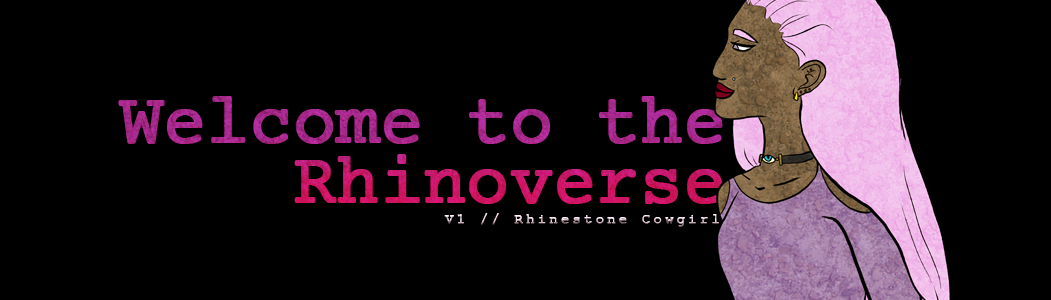
<style>
.page{position:relative;width:1051px;height:300px;background:#000000}
.page>*{position:absolute;margin:0}
.t1{font:72px/60px "CourierPrime";letter-spacing:-0.025em;font-weight:bold}
.t2{font:14px "CourierNewPSMT";letter-spacing:0.2em;font-weight:bold}
</style>
<div class="page">
<p class="t1" style="left:118px;top:96px;width:605px;height:108px;text-align:right">Welcome to the<br>Rhinoverse</p>
<p class="t2" style="left:444px;top:213px;width:275px;height:14px">V1 // Rhinestone Cowgirl</p>
</div>
